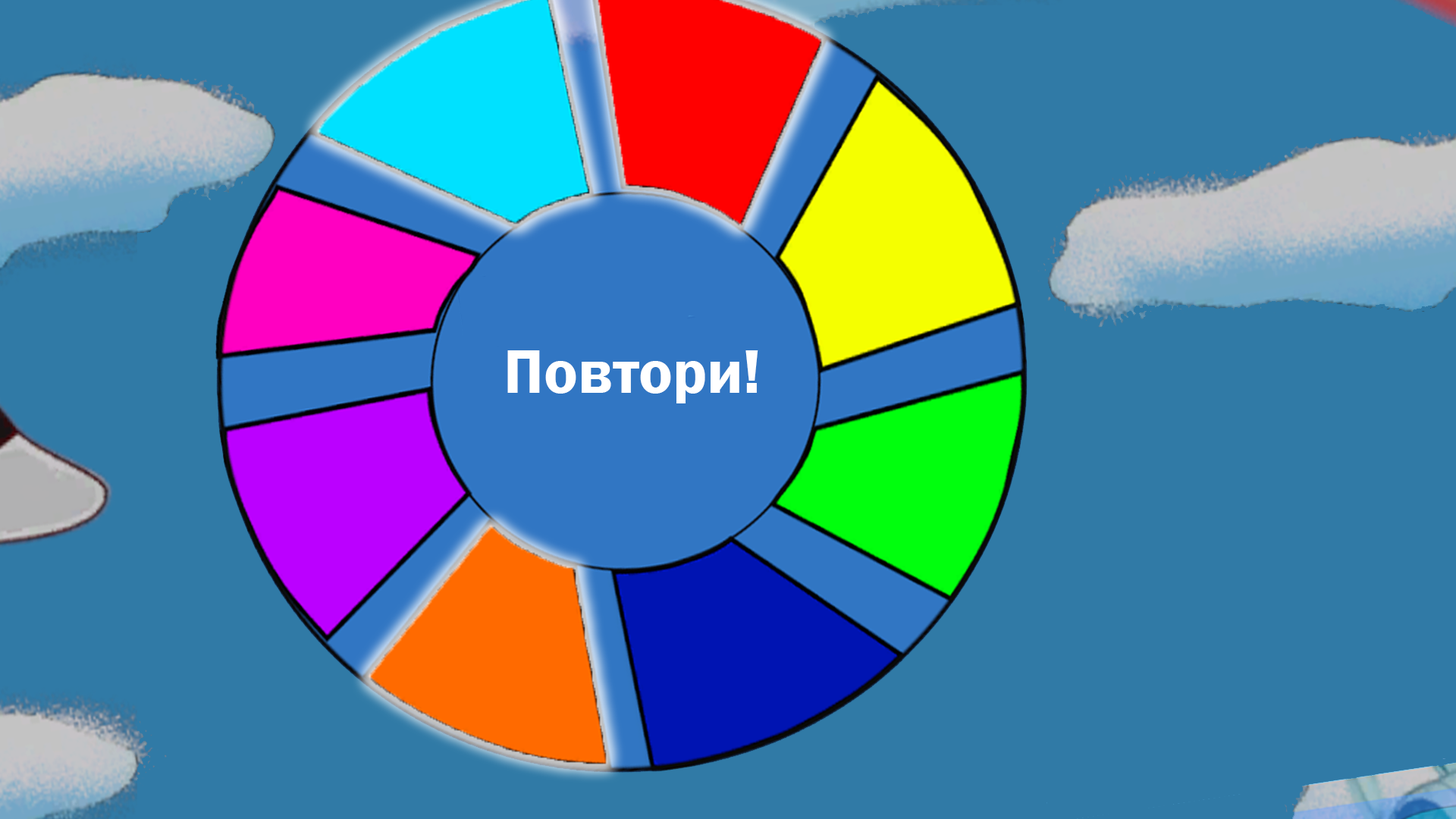
<style>
.page{position:relative;width:1456px;height:819px;background:#307aa6}
.page>*{position:absolute;margin:0}
.t1{font:63.5px "FranklinGothic-Demi";color:#ffffff}
</style>
<div class="page">
<p class="t1" style="left:507px;top:350px;width:251px;height:53px">Повтори!</p>
</div>
